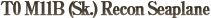
<style>
.page{position:relative;width:211px;height:18px;background:#ffffff}
.page>*{position:absolute;margin:0}
.t1{font:18px "RyuminPro-ExBold";letter-spacing:-0.08em;color:#4a3f32;font-weight:bold;scale:0.9 1}
</style>
<div class="page">
<p class="t1" style="left:0px;top:1px;width:210px;height:18px">T0 M11B (Sk.) Recon Seaplane</p>
</div>
